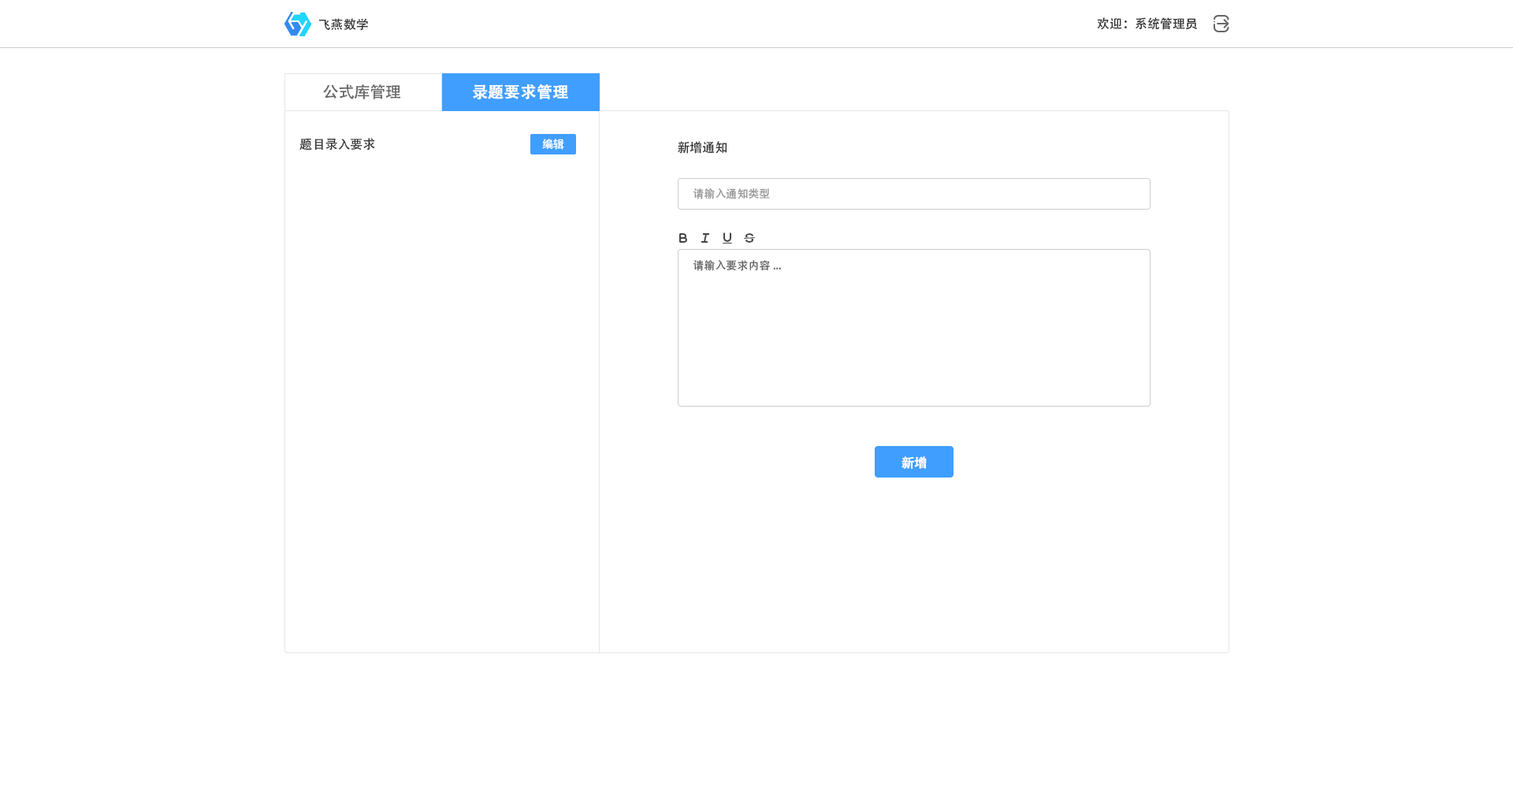
<style>
.page{position:relative;width:1513px;height:788px;background:#ffffff}
.page>*{position:absolute;margin:0}
.t1{font:12.6px "AdobeHeitiStd-Regular";color:#333333}
.t2{font:15.8px "AdobeHeitiStd-Regular";color:#666666}
.t3{font:15.8px "AdobeHeitiStd-Regular";color:#ffffff;font-weight:bold}
.t4{font:11px "AdobeHeitiStd-Regular";color:#ffffff}
.t5{font:11px "AdobeHeitiStd-Regular";color:#999999}
.t6{font:11px "AdobeHeitiStd-Regular";color:#666666}
.t7{font:12.6px "AdobeHeitiStd-Regular";color:#ffffff;font-weight:bold}
</style>
<div class="page">
<p class="t1" style="left:1097px;top:17px;width:101px;height:13px">欢迎：系统管理员</p>
<p class="t1" style="left:318px;top:18px;width:50px;height:13px">飞燕数学</p>
<p class="t2" style="left:323px;top:84px;width:78px;height:15px">公式库管理</p>
<p class="t3" style="left:473px;top:84px;width:95px;height:16px">录题要求管理</p>
<p class="t1" style="left:299px;top:138px;width:76px;height:13px">题目录入要求</p>
<p class="t4" style="left:542px;top:139px;width:22px;height:11px">编辑</p>
<p class="t1" style="left:678px;top:141px;width:49px;height:13px">新增通知</p>
<p class="t5" style="left:694px;top:188px;width:76px;height:11px">请输入通知类型</p>
<p class="t6" style="left:694px;top:260px;width:87px;height:11px">请输入要求内容...</p>
<p class="t7" style="left:902px;top:456px;width:25px;height:13px">新增</p>
</div>
